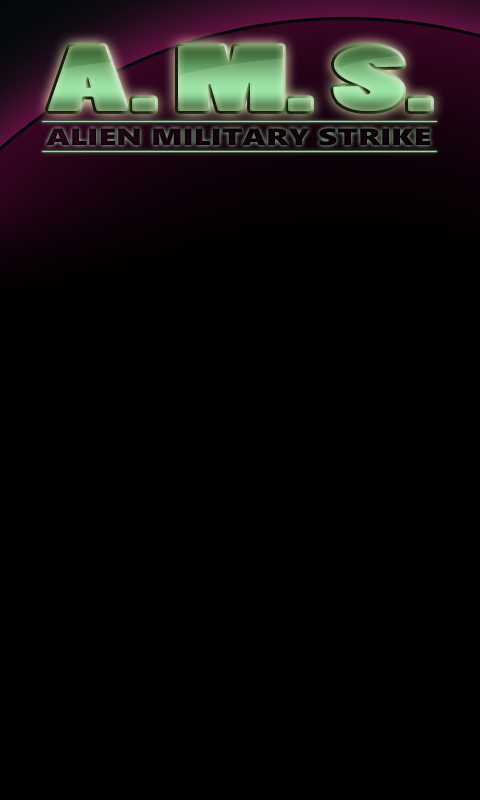
<style>
.page{position:relative;width:480px;height:800px;background:#000000}
.page>*{position:absolute;margin:0}
.t1{font:86px "PoplarStd";scale:1.87 1}
.t2{font:23.6px "SegoeWP-Black";color:#10010a;scale:1.35 1}
</style>
<div class="page">
<p class="t1" style="left:47px;top:45px;width:384px;height:67px">A. M. S.</p>
<p class="t2" style="left:46px;top:128px;width:385px;height:18px">ALIEN MILITARY STRIKE</p>
</div>
